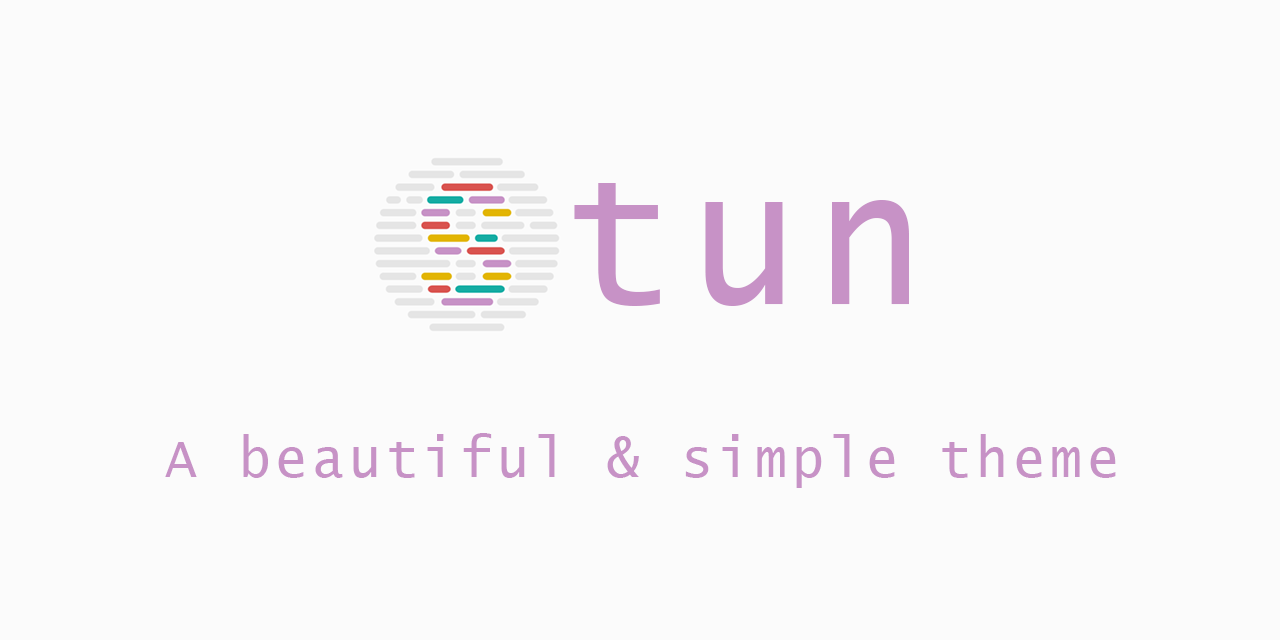
<style>
.page{position:relative;width:1280px;height:640px;background:#fbfbfb}
.page>*{position:absolute;margin:0}
.t1{font:192px "LucidaConsole";letter-spacing:0.1em;color:#c792c6;scale:0.94 1}
.t2{font:56px "LucidaConsole";letter-spacing:0.1em;color:#c792c6;scale:0.94 1}
</style>
<div class="page">
<p class="t1" style="left:574px;top:183px;width:335px;height:123px">tun</p>
<p class="t2" style="left:165px;top:433px;width:951px;height:55px">A beautiful &amp; simple theme</p>
</div>
